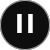
<style>
.page{position:relative;width:50px;height:50px;background:#0e0e0e}
.page>*{position:absolute;margin:0}
.t1{font:26px "TheBoldFont";color:#ffffff}
</style>
<div class="page">
<p class="t1" style="left:17px;top:14px;width:16px;height:19px">| |</p>
</div>
